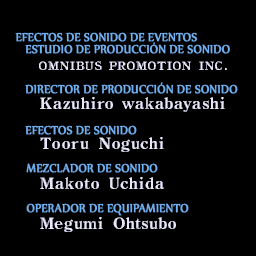
<style>
.page{position:relative;width:256px;height:256px;background:#000000}
.page>*{position:absolute;margin:0}
.t1{font:14px/12px "Nyala-Regular";color:#70b0f0;font-weight:bold;scale:0.9 1}
.t2{font:14px "Nyala-Regular";color:#70b0f0;font-weight:bold;scale:0.9 1}
</style>
<div class="page">
<p class="t1" style="left:15px;top:32px;width:215px;height:22px">EFECTOS DE SONIDO DE EVENTOS<br>   ESTUDIO DE PRODUCCIÓN DE SONIDO</p>
<p class="t2" style="left:25px;top:82px;width:213px;height:12px">DIRECTOR DE PRODUCCIÓN DE SONIDO</p>
<p class="t2" style="left:25px;top:125px;width:112px;height:10px">EFECTOS DE SONIDO</p>
<p class="t2" style="left:26px;top:163px;width:132px;height:10px">MEZCLADOR DE SONIDO</p>
<p class="t2" style="left:26px;top:203px;width:163px;height:13px">OPERADOR DE EQUIPAMIENTO</p>
</div>
